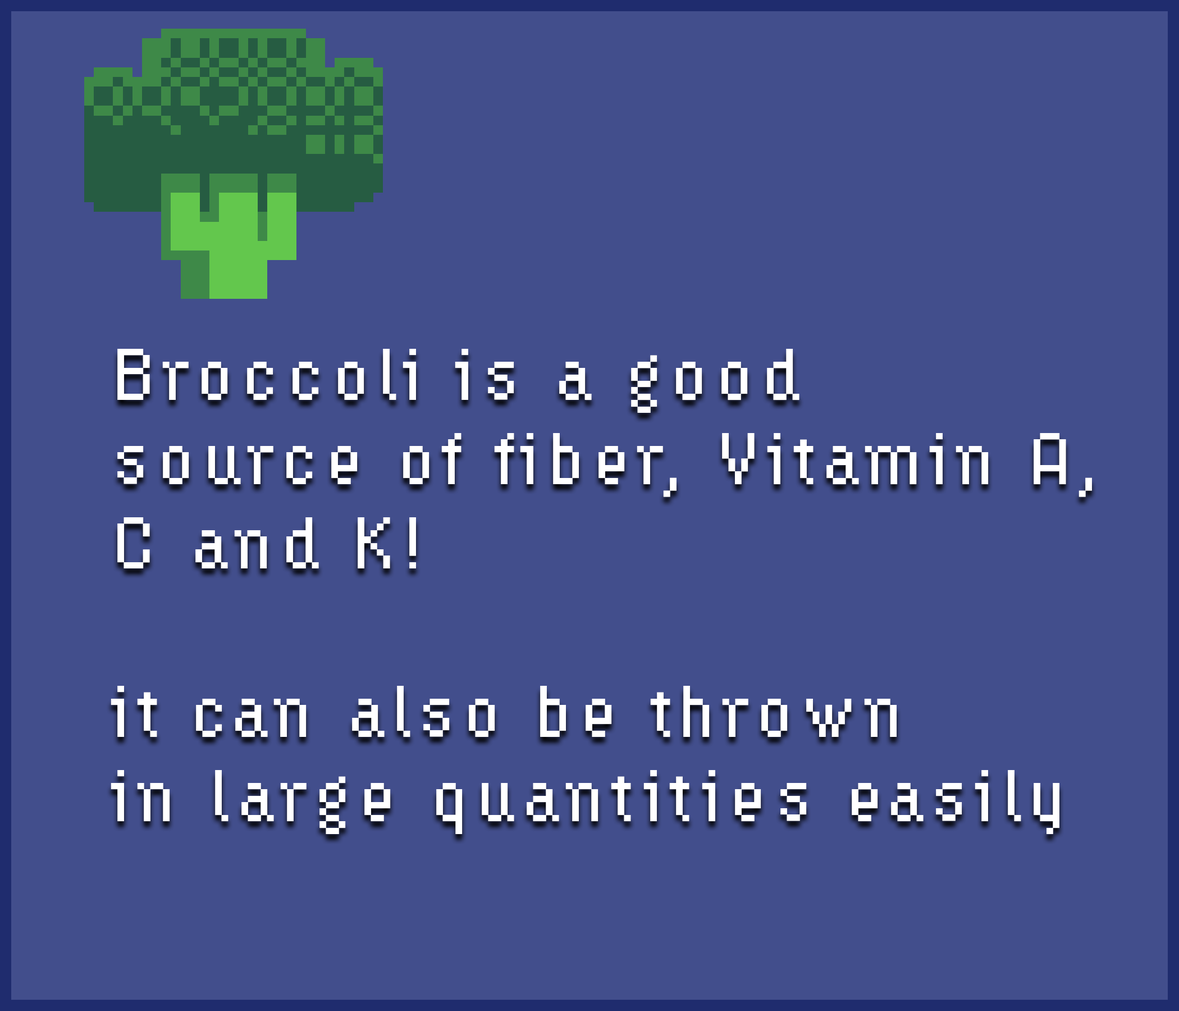
<style>
.page{position:relative;width:1179px;height:1011px;background:#424e8c}
.page>*{position:absolute;margin:0}
.t1{font:70.2px "HydrophiliaIced";letter-spacing:0.1em;color:#ffffff}
</style>
<div class="page">
<p class="t1" style="left:111px;top:349px;width:981px;height:485px">Broccoli is a good<br>source of fiber, Vitamin A,<br>C and K!<br><br>it can also be thrown <br>in large quantities easily</p>
</div>
